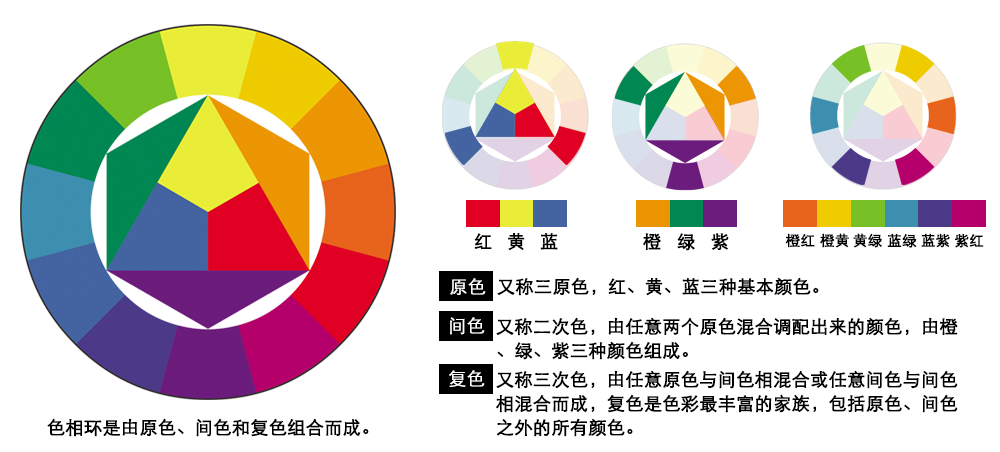
<style>
.page{position:relative;width:1000px;height:452px;background:#ffffff}
.page>*{position:absolute;margin:0}
.t1{font:18px "STXihei";color:#000000;font-weight:bold}
.t2{font:14.4px "STXihei";color:#000000;font-weight:bold}
.t3{font:18px "STXihei";color:#ffffff;font-weight:bold}
.t4{font:18px/24px "STXihei";color:#000000;font-weight:bold}
</style>
<div class="page">
<p class="t1" style="left:474px;top:233px;width:18px;height:17px">红</p>
<p class="t1" style="left:508px;top:233px;width:17px;height:18px">黄</p>
<p class="t1" style="left:540px;top:233px;width:18px;height:17px">蓝</p>
<p class="t1" style="left:643px;top:233px;width:18px;height:17px">橙</p>
<p class="t1" style="left:677px;top:233px;width:18px;height:18px">绿</p>
<p class="t1" style="left:711px;top:233px;width:18px;height:18px">紫</p>
<p class="t2" style="left:785px;top:233px;width:30px;height:15px">橙红</p>
<p class="t2" style="left:820px;top:233px;width:29px;height:15px">橙黄</p>
<p class="t2" style="left:853px;top:233px;width:29px;height:15px">黄绿</p>
<p class="t2" style="left:887px;top:233px;width:30px;height:15px">蓝绿</p>
<p class="t2" style="left:921px;top:233px;width:29px;height:15px">蓝紫</p>
<p class="t2" style="left:954px;top:234px;width:30px;height:14px">紫红</p>
<p class="t3" style="left:450px;top:278px;width:36px;height:17px">原色</p>
<p class="t1" style="left:497px;top:277px;width:322px;height:19px">又称三原色，红、黄、蓝三种基本颜色。</p>
<p class="t3" style="left:450px;top:317px;width:35px;height:18px">间色</p>
<p class="t4" style="left:496px;top:317px;width:462px;height:43px">又称二次色，由任意两个原色混合调配出来的颜色，由橙<br>、绿、紫三种颜色组成。</p>
<p class="t3" style="left:449px;top:370px;width:36px;height:17px">复色</p>
<p class="t4" style="left:496px;top:370px;width:462px;height:67px">又称三次色，由任意原色与间色相混合或任意间色与间色<br>相混合而成，复色是色彩最丰富的家族，包括原色、间色<br>之外的所有颜色。</p>
<p class="t1" style="left:47px;top:418px;width:322px;height:19px">色相环是由原色、间色和复色组合而成。</p>
</div>
